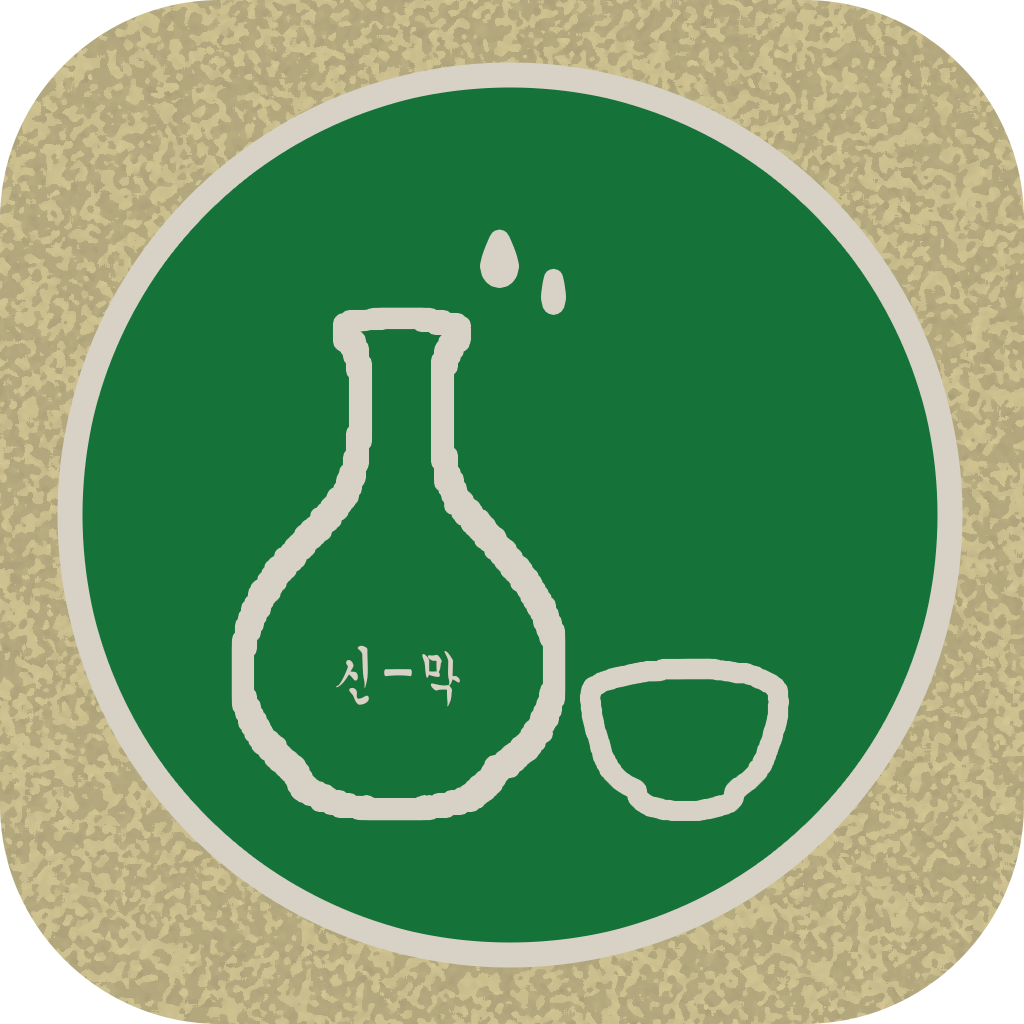
<style>
.page{position:relative;width:1024px;height:1024px;background:#157238}
.page>*{position:absolute;margin:0}
.t1{font:45.8px "HYgsrB";color:#d7d2c5}
</style>
<div class="page">
<p class="t1" style="left:336px;top:645px;width:124px;height:62px">신-막</p>
</div>
